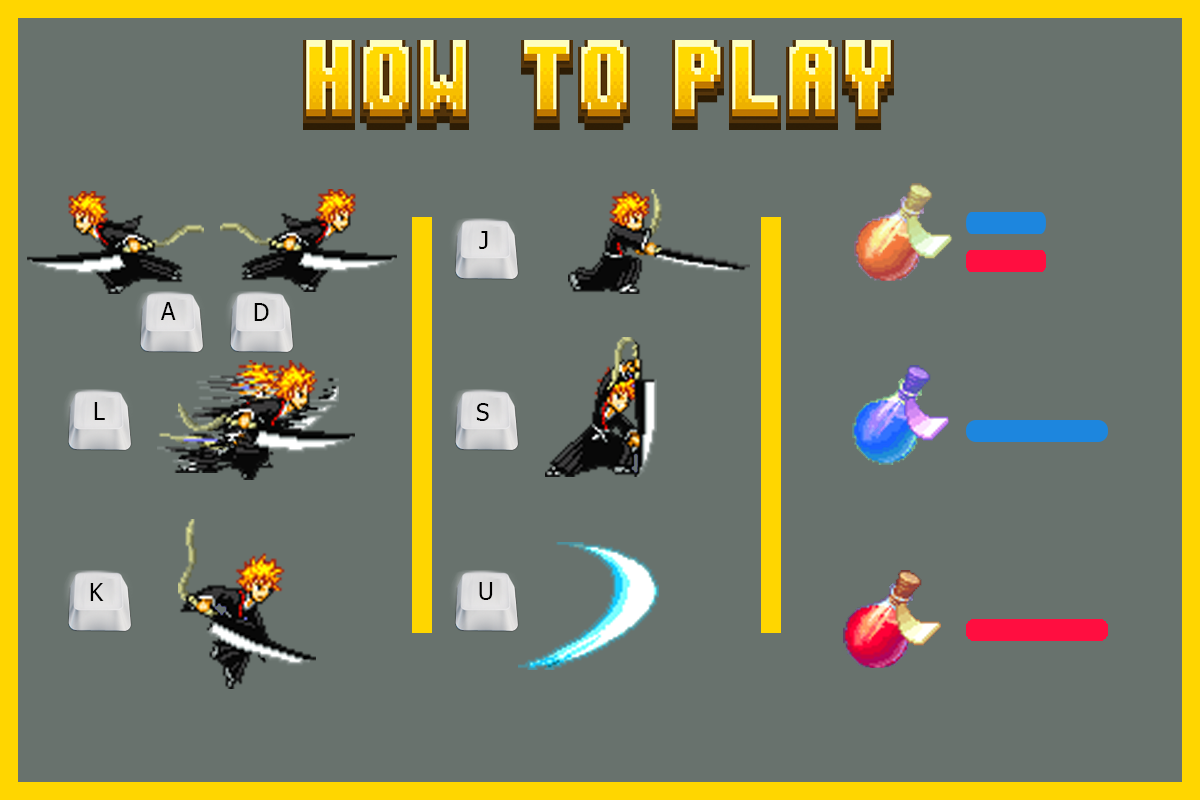
<style>
.page{position:relative;width:1200px;height:800px;background:#68726d}
.page>*{position:absolute;margin:0}
.t1{font:24px "Tahoma";color:#000000}
</style>
<div class="page">
<p class="t1" style="left:479px;top:231px;width:9px;height:18px">J</p>
<p class="t1" style="left:161px;top:302px;width:15px;height:18px">A</p>
<p class="t1" style="left:254px;top:303px;width:15px;height:18px">D</p>
<p class="t1" style="left:94px;top:402px;width:11px;height:18px">L</p>
<p class="t1" style="left:476px;top:403px;width:13px;height:18px">S</p>
<p class="t1" style="left:479px;top:582px;width:14px;height:18px">U</p>
<p class="t1" style="left:90px;top:583px;width:14px;height:18px">K</p>
</div>
